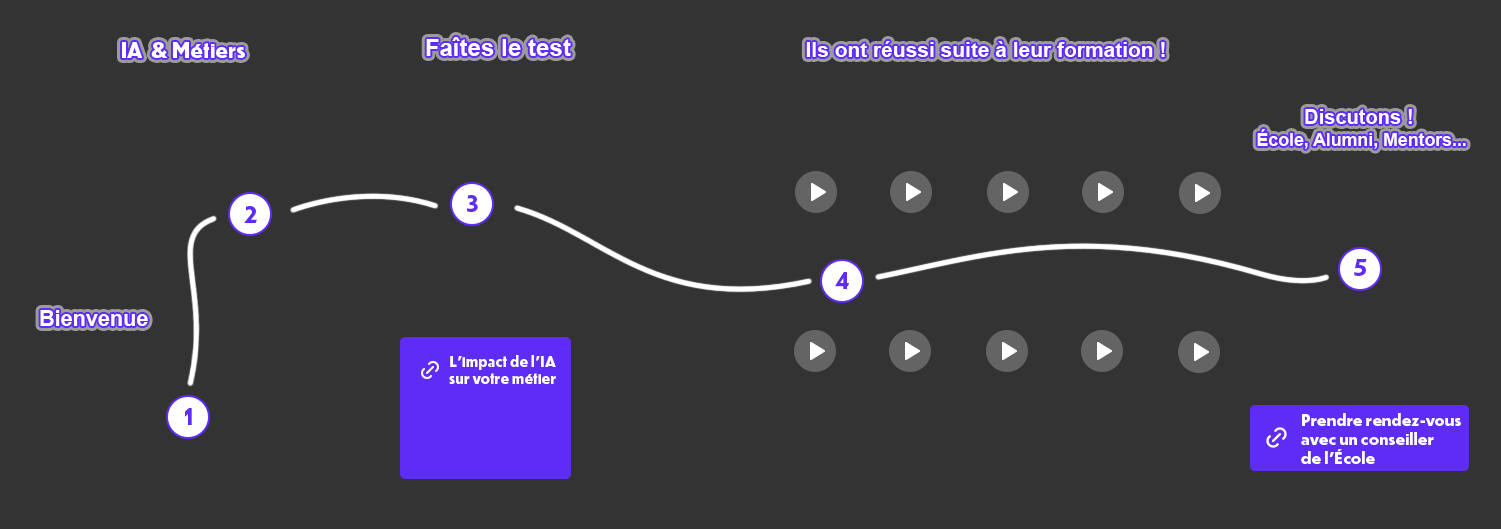
<style>
.page{position:relative;width:1501px;height:529px;background:#333333}
.page>*{position:absolute;margin:0}
.t1{font:24.1px "Arial-BoldMT";color:#ffffff}
.t2{font:21px "Arial-BoldMT";color:#ffffff}
.t3{font:20px "DunbarText-ExtraBold";color:#ffffff}
.t4{font:17.7px "Arial-BoldMT";color:#ffffff}
.t5{font:20.1px "Arial-BoldMT";color:#ffffff}
.t6{font:22px "DunbarText-ExtraBold";color:#5f2cf6}
.t7{font:21.6px "Arial-BoldMT";color:#ffffff}
.t8{font:14px "DunbarText-ExtraBold";color:#ffffff}
.t9{font:15.7px "DunbarText-ExtraBold";color:#ffffff}
</style>
<div class="page">
<p class="t1" style="left:426px;top:37px;width:145px;height:19px">Faîtes le test</p>
<p class="t2" style="left:806px;top:41px;width:359px;height:16px">Ils ont réussi suite à leur formation !</p>
<p class="t3" style="left:122px;top:42px;width:123px;height:16px">IA  &amp; Métiers</p>
<p class="t4" style="left:1257px;top:109px;width:209px;height:40px;text-align:center"><span class="t5">Discutons ! <br></span>École, Alumni, Mentors...</p>
<p class="t6" style="left:466px;top:195px;width:12px;height:17px">3</p>
<p class="t6" style="left:244px;top:206px;width:13px;height:17px">2</p>
<p class="t6" style="left:1354px;top:259px;width:13px;height:17px">5</p>
<p class="t6" style="left:835px;top:272px;width:14px;height:17px">4</p>
<p class="t7" style="left:40px;top:310px;width:108px;height:16px">Bienvenue</p>
<p class="t8" style="left:449px;top:355px;width:107px;height:29px;text-align:center">L’impact de l’IA <br>sur votre métier</p>
<p class="t6" style="left:185px;top:408px;width:7px;height:17px">1</p>
<p class="t9" style="left:1301px;top:413px;width:160px;height:51px">Prendre rendez-vous <br>avec un conseiller <br>de l'École</p>
</div>
